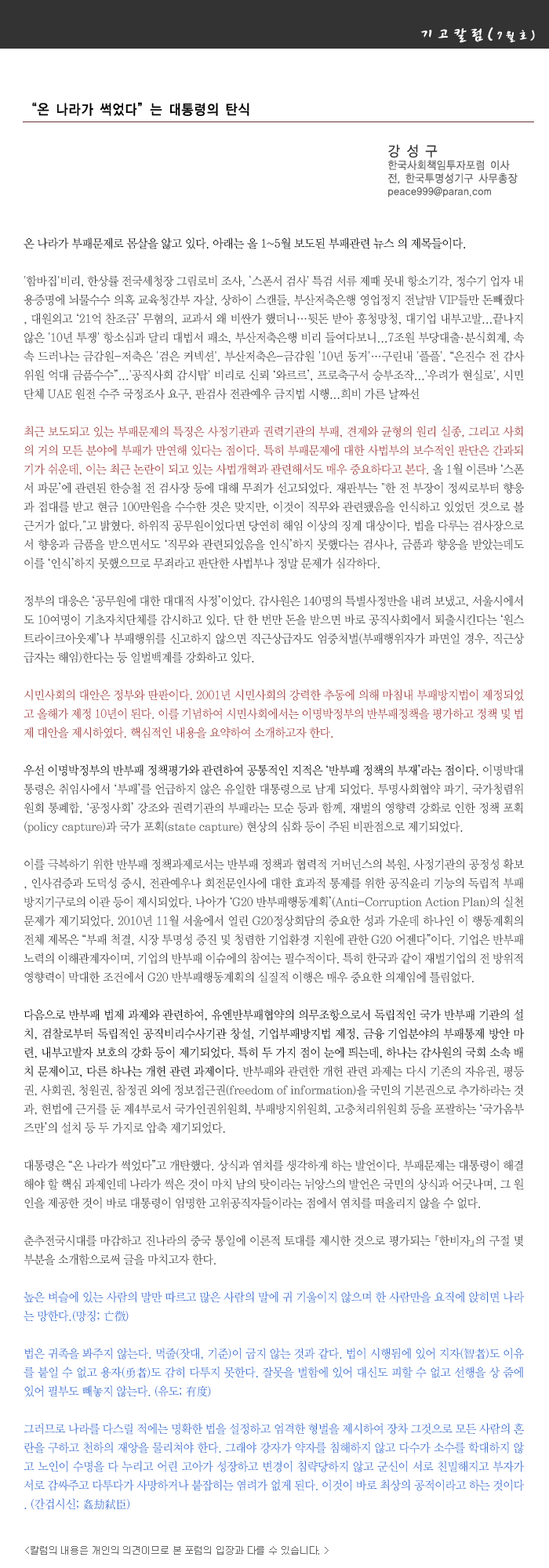
<style>
.page{position:relative;width:549px;height:1568px;background:#ffffff}
.page>*{position:absolute;margin:0}
.t1{font:18.8px "CwritB";letter-spacing:-0.01em;color:#ffffff;scale:0.9 1}
.t2{font:14.1px "CwritB";letter-spacing:-0.01em;color:#ffffff;scale:0.9 1}
.t3{font:14.1px "YDIYGO130-KSCpc-EUC-H";letter-spacing:-0.01em;color:#000000;scale:0.9 1}
.t4{font:11px "YDIYGO120-KSCpc-EUC-H";letter-spacing:-0.01em;color:#666666;scale:0.9 1}
.t5{font:14.1px "YDIYGO120-KSCpc-EUC-H";letter-spacing:-0.01em;color:#333333;scale:0.9 1}
.t6{font:11.8px/18.8px "YDIWebBatan";letter-spacing:-0.01em;color:#333333;scale:0.95 1}
.t7{font:11.8px/18.8px "YDIWebBatan";letter-spacing:-0.01em;color:#000000;scale:0.95 1}
.t8{font:11.8px/18.8px "YDIWebBatan";letter-spacing:-0.01em;color:#993333;scale:0.95 1}
.t9{font:11.8px/18.8px "YDIWebBatan";letter-spacing:-0.01em;color:#3366cc;scale:0.95 1}
.t10{font:9.4px "Gulim";letter-spacing:-0.01em;color:#666666}
</style>
<div class="page">
<p class="t1" style="left:421px;top:27px;width:114px;height:16px">기고칼럼(<span class="t2">7월호)</span></p>
<p class="t3" style="left:32px;top:102px;width:217px;height:14px">“온 나라가 썩었다”는 대통령의 탄식</p>
<p class="t4" style="left:387px;top:144px;width:130px;height:54px"><span class="t5">강 성 구 <br></span>한국사회책임투자포럼 이사<br>전, 한국투명성기구 사무총장<br>peace999@paran.com</p>
<p class="t6" style="left:24px;top:238px;width:500px;height:1272px;text-align:justify"><span class="t7">온 나라가 부패문제로 몸살을 앓고 있다. 아래는 올 1~5월 보도된 부패관련 뉴스 의 제목들이다.<br></span><br>'함바집'비리, 한상률 전국세청장 그림로비 조사, `스폰서 검사' 특검 서류 제때 못내 항소기각, 정수기 업자 내용증명에 뇌물수수 의혹 교육청간부 자살, 상하이 스캔들, 부산저축은행 영업정지 전날밤 VIP들만 돈빼줬다, 대원외고 ‘21억 찬조금’ 무혐의, 교과서 왜 비싼가 했더니…뒷돈 받아 흥청망청, 대기업 내부고발...끝나지 않은 '10년 투쟁' 항소심과 달리 대법서 패소, 부산저축은행 비리 들여다보니...7조원 부당대출·분식회계, 속속 드러나는 금감원-저축은 '검은 커넥션', 부산저축은-금감원 '10년 동거'…구린내 '풀풀', “은진수 전 감사위원 억대 금품수수”...'공직사회 감시탑' 비리로 신뢰 ‘와르르’, 프로축구서 승부조작...'우려가 현실로', 시민단체 UAE 원전 수주 국정조사 요구, 판검사 전관예우 금지법 시행...희비 가른 날짜선<br><br><span class="t8">최근 보도되고 있는 부패문제의 특징은 사정기관과 권력기관의 부패, 견제와 균형의 원리 실종, 그리고 사회의 거의 모든 분야에 부패가 만연해 있다는 점이다. 특히 부패문제에 대한 사법부의 보수적인 판단은 간과되기가 쉬운데, 이는 최근 논란이 되고 있는 사법개혁과 관련해서도 매우 중요하다고 본다.</span> 올 1월 이른바 ‘스폰서 파문’에 관련된 한승철 전 검사장 등에 대해 무죄가 선고되었다. 재판부는 "한 전 부장이 정씨로부터 향응과 접대를 받고 현금 100만원을 수수한 것은 맞지만, 이것이 직무와 관련됐음을 인식하고 있었던 것으로 볼 근거가 없다."고 밝혔다. 하위직 공무원이었다면 당연히 해임 이상의 징계 대상이다. 법을 다루는 검사장으로서 향응과 금품을 받으면서도 ‘직무와 관련되었음을 인식’하지 못했다는 검사나, 금품과 향응을 받았는데도 이를 ‘인식’하지 못했으므로 무죄라고 판단한 사법부나 정말 문제가 심각하다.<br><br>정부의 대응은 ‘공무원에 대한 대대적 사정’이었다. 감사원은 140명의 특별사정반을 내려 보냈고, 서울시에서도 10여명이 기초자치단체를 감시하고 있다. 단 한 번만 돈을 받으면 바로 공직사회에서 퇴출시킨다는 ‘원스트라이크아웃제’나 부패행위를 신고하지 않으면 직근상급자도 엄중처벌(부패행위자가 파면일 경우, 직근상급자는 해임)한다는 등 일벌백계를 강화하고 있다.<br><br><span class="t8">시민사회의 대안은 정부와 딴판이다. 2001년 시민사회의 강력한 추동에 의해 마침내 부패방지법이 제정되었고 올해가 제정 10년이 된다. 이를 기념하여 시민사회에서는 이명박정부의 반부패정책을 평가하고 정책 및 법제 대안을 제시하였다. 핵심적인 내용을 요약하여 소개하고자 한다.<br><br></span><span class="t7">우선 이명박정부의 반부패 정책평가와 관련하여 공통적인 지적은 ‘반부패 정책의 부재’라는 점이다.</span> 이명박대통령은 취임사에서 ‘부패’를 언급하지 않은 유일한 대통령으로 남게 되었다. 투명사회협약 파기, 국가청렴위원회 통폐합, ‘공정사회’ 강조와 권력기관의 부패라는 모순 등과 함께, 재벌의 영향력 강화로 인한 정책 포획(policy capture)과 국가 포획(state capture) 현상의 심화 등이 주된 비판점으로 제기되었다.<br><br>이를 극복하기 위한 반부패 정책과제로서는 반부패 정책과 협력적 거버넌스의 복원, 사정기관의 공정성 확보, 인사검증과 도덕성 중시, 전관예우나 회전문인사에 대한 효과적 통제를 위한 공직윤리 기능의 독립적 부패방지기구로의 이관 등이 제시되었다. 나아가 ‘G20 반부패행동계획’(Anti-Corruption Action Plan)의 실천 문제가 제기되었다. 2010년 11월 서울에서 열린 G20정상회담의 중요한 성과 가운데 하나인 이 행동계획의 전체 제목은 “부패 척결, 시장 투명성 증진 및 청렴한 기업환경 지원에 관한 G20 어젠다”이다. 기업은 반부패 노력의 이해관계자이며, 기업의 반부패 이슈에의 참여는 필수적이다. 특히 한국과 같이 재벌기업의 전 방위적 영향력이 막대한 조건에서 G20 반부패행동계획의 실질적 이행은 매우 중요한 의제임에 틀림없다.<br><br><span class="t7">다음으로 반부패 법제 과제와 관련하여, 유엔반부패협약의 의무조항으로서 독립적인 국가 반부패 기관의 설치, 검찰로부터 독립적인 공직비리수사기관 창설, 기업부패방지법 제정, 금융․기업분야의 부패통제 방안 마련, 내부고발자 보호의 강화 등이 제기되었다. 특히 두 가지 점이 눈에 띄는데, 하나는 감사원의 국회 소속 배치 문제이고, 다른 하나는 개헌 관련 과제이다.</span> 반부패와 관련한 개헌 관련 과제는 다시 기존의 자유권, 평등권, 사회권, 청원권, 참정권 외에 정보접근권(freedom of information)을 국민의 기본권으로 추가하라는 것과, 헌법에 근거를 둔 제4부로서 국가인권위원회, 부패방지위원회, 고충처리위원회 등을 포괄하는 ‘국가옴부즈만’의 설치 등 두 가지로 압축 제기되었다.<br><br>대통령은 “온 나라가 썩었다”고 개탄했다. 상식과 염치를 생각하게 하는 발언이다. 부패문제는 대통령이 해결해야 할 핵심 과제인데 나라가 썩은 것이 마치 남의 탓이라는 뉘앙스의 발언은 국민의 상식과 어긋나며, 그 원인을 제공한 것이 바로 대통령이 임명한 고위공직자들이라는 점에서 염치를 떠올리지 않을 수 없다.<br><br>춘추전국시대를 마감하고 진나라의 중국 통일에 이론적 토대를 제시한 것으로 평가되는 『한비자』의 구절 몇 부분을 소개함으로써 글을 마치고자 한다.<br><br><span class="t9">높은 벼슬에 있는 사람의 말만 따르고 많은 사람의 말에 귀 기울이지 않으며 한 사람만을 요직에 앉히면 나라는 망한다.(망징; 亡徵)<br><br>법은 귀족을 봐주지 않는다. 먹줄(잣대, 기준)이 굽지 않는 것과 같다. 법이 시행됨에 있어 지자(智者)도 이유를 붙일 수 없고 용자(勇者)도 감히 다투지 못한다. 잘못을 벌함에 있어 대신도 피할 수 없고 선행을 상 줌에 있어 필부도 빼놓지 않는다. (유도; 有度)<br><br>그러므로 나라를 다스릴 적에는 명확한 법을 설정하고 엄격한 형벌을 제시하여 장차 그것으로 모든 사람의 혼란을 구하고 천하의 재앙을 물리쳐야 한다. 그래야 강자가 약자를 침해하지 않고 다수가 소수를 학대하지 않고 노인이 수명을 다 누리고 어린 고아가 성장하고 변경이 침략당하지 않고 군신이 서로 친밀해지고 부자가 서로 감싸주고 다투다가 사망하거나 붙잡히는 염려가 없게 된다. 이것이 바로 최상의 공적이라고 하는 것이다. (간겁시신; 姦劫弑臣)</span></p>
<p class="t10" style="left:25px;top:1546px;width:303px;height:9px">&lt;칼럼의 내용은 개인의 의견이므로 본 포럼의 입장과 다를 수 있습니다. &gt;</p>
</div>
